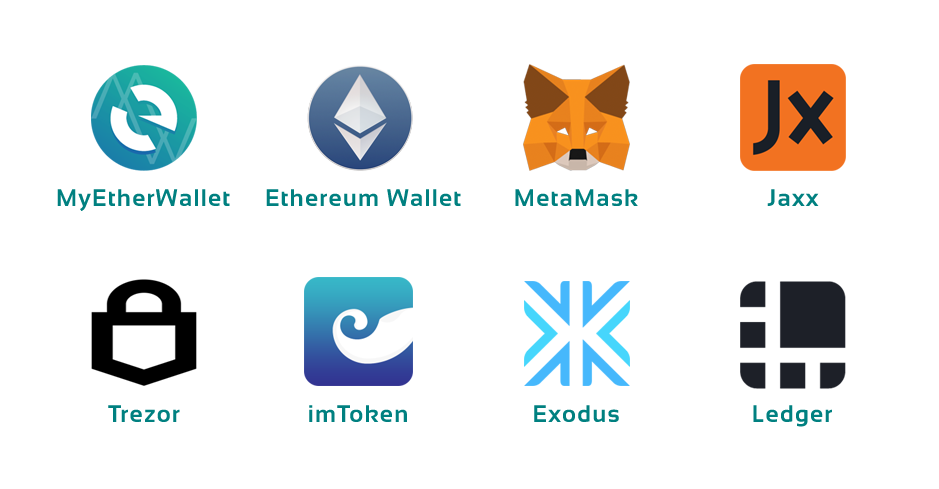
<style>
.page{position:relative;width:939px;height:489px;background:#ffffff}
.page>*{position:absolute;margin:0}
.t1{font:24px "Sansation-Bold";letter-spacing:0.05em;color:#008080}
</style>
<div class="page">
<p class="t1" style="left:57px;top:189px;width:173px;height:22px">MyEtherWallet</p>
<p class="t1" style="left:266px;top:189px;width:195px;height:17px">Ethereum Wallet</p>
<p class="t1" style="left:515px;top:189px;width:123px;height:17px">MetaMask</p>
<p class="t1" style="left:767px;top:189px;width:52px;height:17px">Jaxx</p>
<p class="t1" style="left:108px;top:405px;width:72px;height:17px">Trezor</p>
<p class="t1" style="left:309px;top:405px;width:98px;height:17px">imToken</p>
<p class="t1" style="left:534px;top:405px;width:85px;height:17px">Exodus</p>
<p class="t1" style="left:753px;top:405px;width:79px;height:22px">Ledger</p>
</div>
